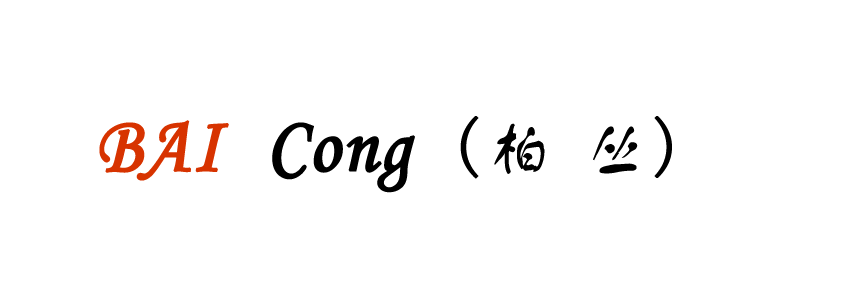
<style>
.page{position:relative;width:851px;height:284px;background:#ffffff}
.page>*{position:absolute;margin:0}
.t1{font:80px "STLiti";letter-spacing:0.01em;color:#d73300;font-weight:bold;scale:0.95 1}
.t2{font:80px "STLiti";letter-spacing:0.01em;color:#000000;font-weight:bold;scale:0.95 1}
.t3{font:80px "STLiti";color:#000000;font-weight:bold;scale:0.95 1}
.t4{font:68px "FZSTK--GBK1-0";letter-spacing:0.1em;color:#000000;scale:0.95 1}
.t5{font:60px "STXingkai";color:#000000;scale:0.95 1}
.t6{font:68px "YouYuan";letter-spacing:0.1em;color:#000000;font-weight:bold;scale:0.95 1}
</style>
<div class="page">
<p class="t1" style="left:99px;top:120px;width:316px;height:73px">BAI <span class="t2"> Con</span><span class="t3">g</span></p>
<p class="t4" style="left:460px;top:116px;width:212px;height:63px"><span class="t5">  </span><span class="t6">(</span>柏 丛<span class="t6">)</span></p>
</div>
